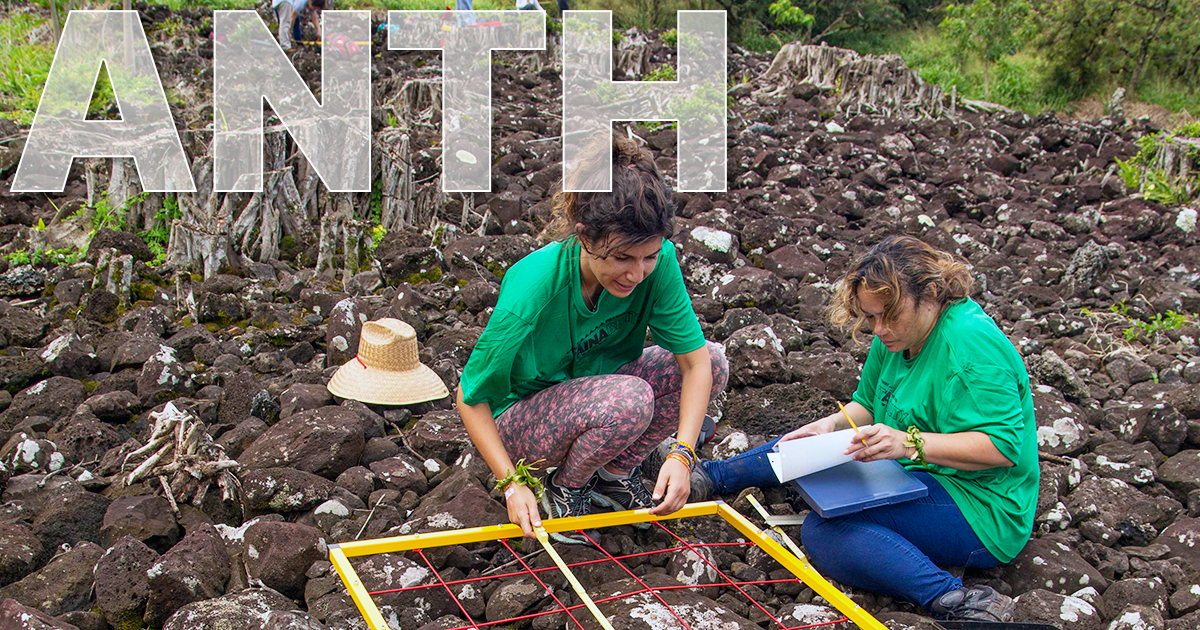
<style>
.page{position:relative;width:1200px;height:630px}
.page>*{position:absolute;margin:0}
.t1{font:250px "Inter-Black"}
</style>
<div class="page">
<p class="t1" style="left:9px;top:10px;width:718px;height:182px">ANTH</p>
</div>
